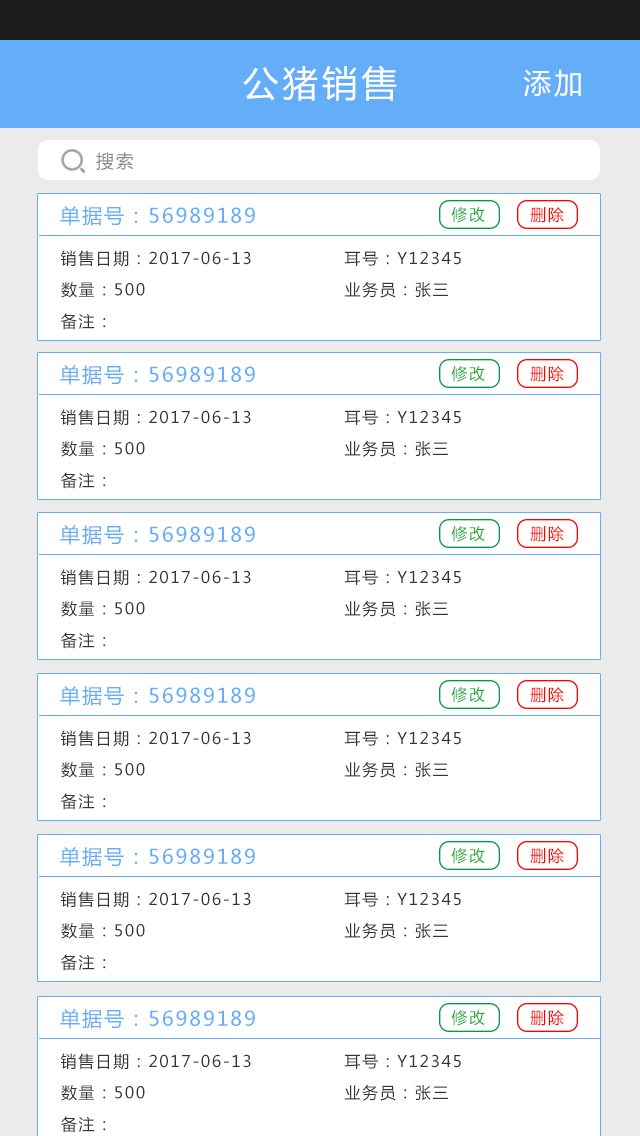
<style>
.page{position:relative;width:640px;height:1136px;background:#ffffff}
.page>*{position:absolute;margin:0}
.t1{font:36px "MicrosoftYaHei";letter-spacing:0.1em;color:#ffffff}
.t2{font:28px "MicrosoftYaHei";letter-spacing:0.1em;color:#ffffff}
.t3{font:18px "MicrosoftYaHei";letter-spacing:0.1em;color:#8a8989}
.t4{font:20px "MicrosoftYaHei";letter-spacing:0.1em;color:#64adf9}
.t5{font:16px "MicrosoftYaHei";letter-spacing:0.1em;color:#22ac38}
.t6{font:16px "MicrosoftYaHei";letter-spacing:0.1em;color:#ff0000}
.t7{font:16px "MicrosoftYaHei";letter-spacing:0.1em;color:#363535}
</style>
<div class="page">
<p class="t1" style="left:243px;top:65px;width:154px;height:36px">公猪销售</p>
<p class="t2" style="left:523px;top:69px;width:58px;height:28px">添加</p>
<p class="t3" style="left:96px;top:152px;width:38px;height:18px">搜索</p>
<p class="t4" style="left:60px;top:206px;width:195px;height:20px">单据号：56989189</p>
<p class="t5" style="left:451px;top:207px;width:34px;height:16px">修改</p>
<p class="t6" style="left:530px;top:207px;width:34px;height:16px">删除</p>
<p class="t7" style="left:60px;top:250px;width:191px;height:17px">销售日期：2017-06-13</p>
<p class="t7" style="left:344px;top:251px;width:117px;height:15px">耳号：Y12345</p>
<p class="t7" style="left:344px;top:281px;width:104px;height:17px">业务员：张三</p>
<p class="t7" style="left:61px;top:282px;width:84px;height:16px">数量：500</p>
<p class="t7" style="left:61px;top:313px;width:45px;height:17px">备注：</p>
<p class="t4" style="left:60px;top:365px;width:195px;height:20px">单据号：56989189</p>
<p class="t5" style="left:451px;top:366px;width:34px;height:16px">修改</p>
<p class="t6" style="left:530px;top:366px;width:34px;height:16px">删除</p>
<p class="t7" style="left:60px;top:409px;width:191px;height:17px">销售日期：2017-06-13</p>
<p class="t7" style="left:344px;top:410px;width:117px;height:15px">耳号：Y12345</p>
<p class="t7" style="left:61px;top:441px;width:84px;height:16px">数量：500</p>
<p class="t7" style="left:344px;top:440px;width:104px;height:17px">业务员：张三</p>
<p class="t7" style="left:61px;top:472px;width:45px;height:17px">备注：</p>
<p class="t4" style="left:60px;top:525px;width:195px;height:20px">单据号：56989189</p>
<p class="t5" style="left:451px;top:526px;width:34px;height:16px">修改</p>
<p class="t6" style="left:530px;top:526px;width:34px;height:16px">删除</p>
<p class="t7" style="left:60px;top:569px;width:191px;height:17px">销售日期：2017-06-13</p>
<p class="t7" style="left:344px;top:570px;width:117px;height:15px">耳号：Y12345</p>
<p class="t7" style="left:61px;top:601px;width:84px;height:16px">数量：500</p>
<p class="t7" style="left:344px;top:600px;width:104px;height:17px">业务员：张三</p>
<p class="t7" style="left:61px;top:632px;width:45px;height:17px">备注：</p>
<p class="t4" style="left:60px;top:686px;width:195px;height:20px">单据号：56989189</p>
<p class="t5" style="left:451px;top:687px;width:34px;height:16px">修改</p>
<p class="t6" style="left:530px;top:687px;width:34px;height:16px">删除</p>
<p class="t7" style="left:60px;top:730px;width:191px;height:17px">销售日期：2017-06-13</p>
<p class="t7" style="left:344px;top:731px;width:117px;height:15px">耳号：Y12345</p>
<p class="t7" style="left:344px;top:761px;width:104px;height:17px">业务员：张三</p>
<p class="t7" style="left:61px;top:762px;width:84px;height:16px">数量：500</p>
<p class="t7" style="left:61px;top:793px;width:45px;height:17px">备注：</p>
<p class="t4" style="left:60px;top:847px;width:195px;height:20px">单据号：56989189</p>
<p class="t5" style="left:451px;top:848px;width:34px;height:16px">修改</p>
<p class="t6" style="left:530px;top:848px;width:34px;height:16px">删除</p>
<p class="t7" style="left:60px;top:891px;width:191px;height:17px">销售日期：2017-06-13</p>
<p class="t7" style="left:344px;top:892px;width:117px;height:15px">耳号：Y12345</p>
<p class="t7" style="left:61px;top:923px;width:84px;height:16px">数量：500</p>
<p class="t7" style="left:344px;top:922px;width:104px;height:17px">业务员：张三</p>
<p class="t7" style="left:61px;top:954px;width:45px;height:17px">备注：</p>
<p class="t4" style="left:60px;top:1009px;width:195px;height:20px">单据号：56989189</p>
<p class="t5" style="left:451px;top:1010px;width:34px;height:16px">修改</p>
<p class="t6" style="left:530px;top:1010px;width:34px;height:16px">删除</p>
<p class="t7" style="left:60px;top:1053px;width:191px;height:17px">销售日期：2017-06-13</p>
<p class="t7" style="left:344px;top:1054px;width:117px;height:15px">耳号：Y12345</p>
<p class="t7" style="left:61px;top:1085px;width:84px;height:16px">数量：500</p>
<p class="t7" style="left:344px;top:1084px;width:104px;height:17px">业务员：张三</p>
<p class="t7" style="left:61px;top:1116px;width:45px;height:17px">备注：</p>
</div>
